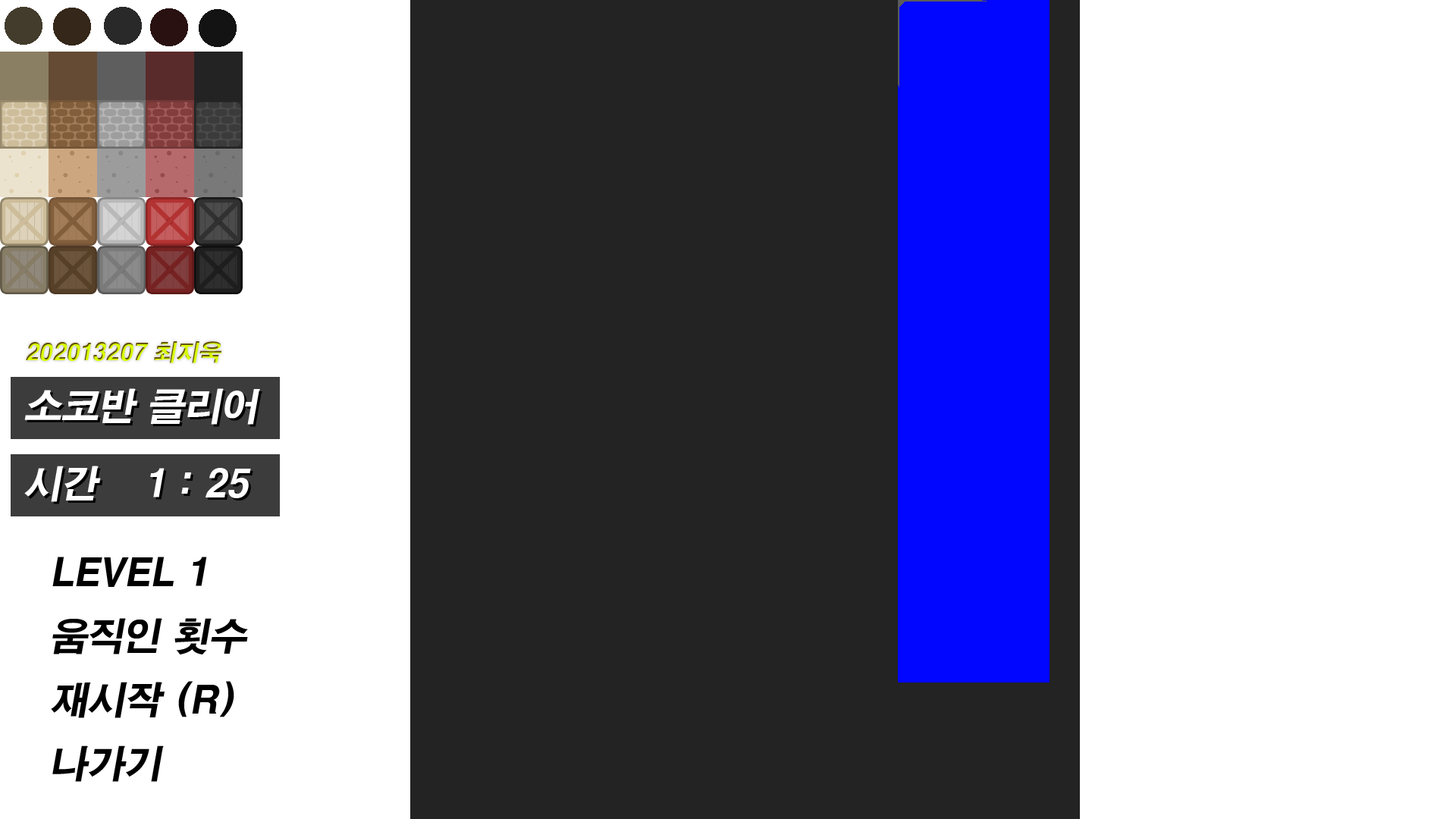
<style>
.page{position:relative;width:1456px;height:819px;background:#ffffff}
.page>*{position:absolute;margin:0}
.t1{font:22.7px "H2gtrE";font-style:italic}
.t2{font:37.9px "H2gtrE";color:#ffffff;font-style:italic}
.t3{font:37.9px/31.8px "H2gtrE";color:#000000;font-style:italic}
</style>
<div class="page">
<p class="t1" style="left:26px;top:341px;width:196px;height:22px">202013207 최지욱</p>
<p class="t1" style="left:27px;top:343px;width:196px;height:22px">202013207 최지욱</p>
<p class="t2" style="left:24px;top:388px;width:236px;height:37px">소코반 클리어</p>
<p class="t2" style="left:24px;top:466px;width:77px;height:36px">시간</p>
<p class="t2" style="left:150px;top:468px;width:101px;height:30px">1 : 25</p>
<p class="t3" style="left:51px;top:557px;width:197px;height:225px">LEVEL 1<br><br>움직인 횟수<br><br>재시작 (R)<br><br>나가기</p>
</div>
